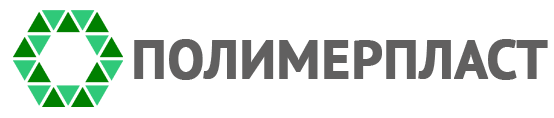
<style>
.page{position:relative;width:554px;height:118px;background:#ffffff}
.page>*{position:absolute;margin:0}
.t1{font:54px "PTSans-Bold";color:#616060;text-transform:uppercase;font-weight:bold}
</style>
<div class="page">
<p class="t1" style="left:134px;top:39px;width:414px;height:41px">ПолимерпласТ</p>
</div>
